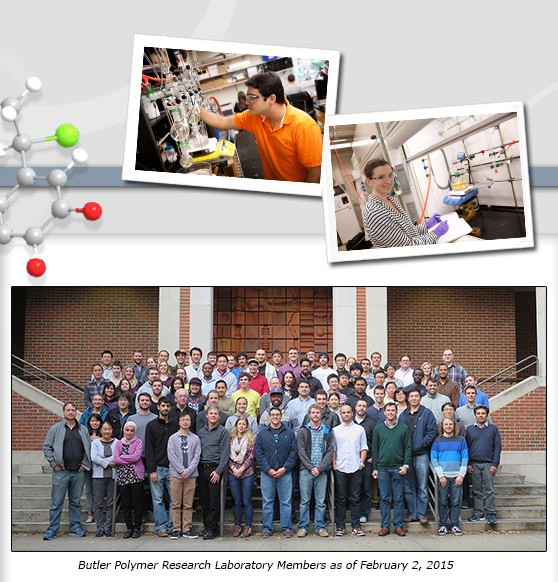
<style>
.page{position:relative;width:558px;height:582px}
.page>*{position:absolute;margin:0}
.t1{font:10.9px "Verdana";color:#000000;font-style:italic}
</style>
<div class="page">
<p class="t1" style="left:78px;top:560px;width:376px;height:11px">Butler Polymer Research Laboratory Members as of February 2, 2015</p>
</div>
